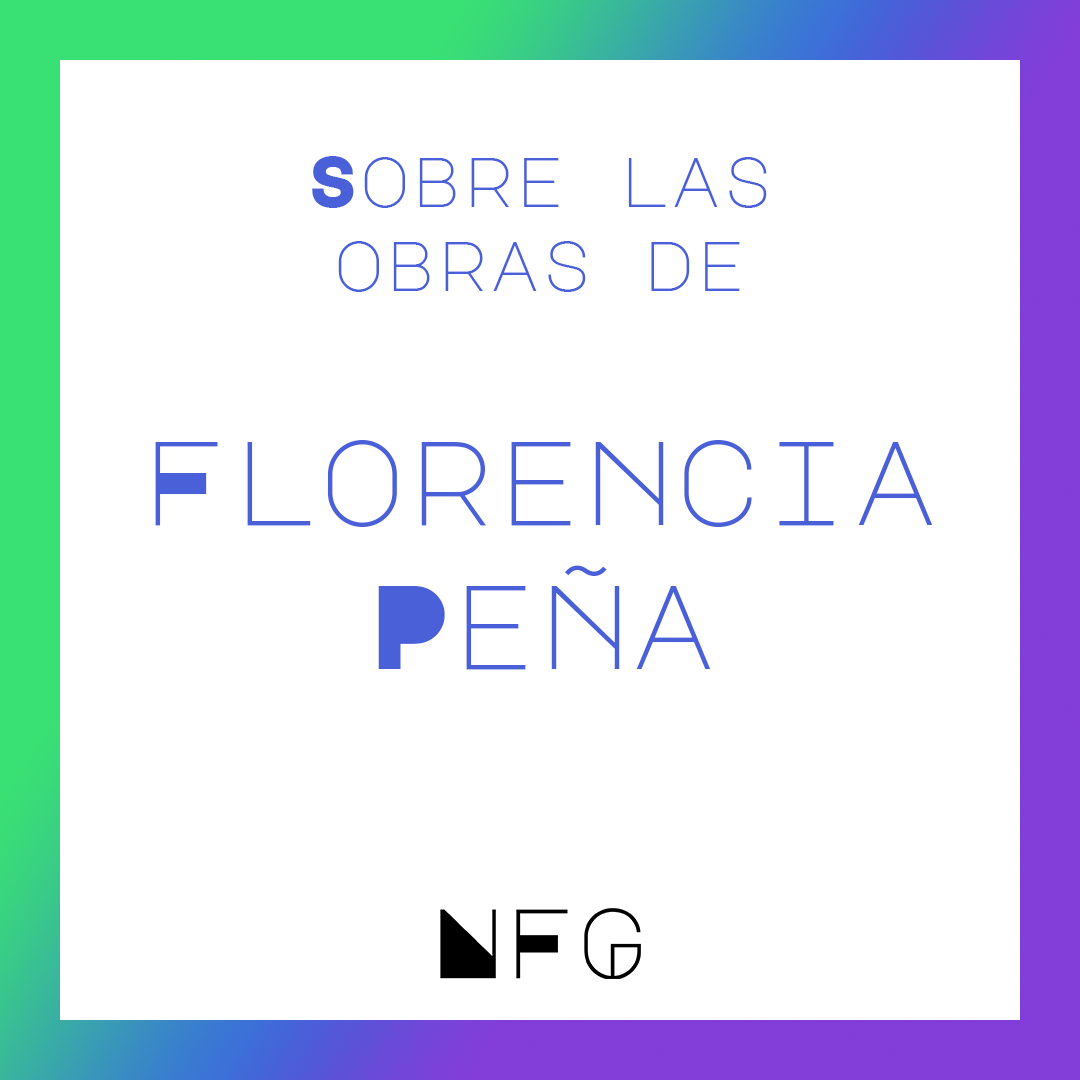
<style>
.page{position:relative;width:1080px;height:1080px;background:#ffffff}
.page>*{position:absolute;margin:0}
.t1{font:70px "MajorMonoDisplay-Regular";color:#4960d8}
.t2{font:120px "MajorMonoDisplay-Regular";color:#4960d8}
</style>
<div class="page">
<p class="t1" style="left:312px;top:156px;width:455px;height:136px;text-align:center">Sobre las obras de</p>
<p class="t2" style="left:155px;top:440px;width:778px;height:230px;text-align:center">Florencia<br>Peña</p>
</div>
